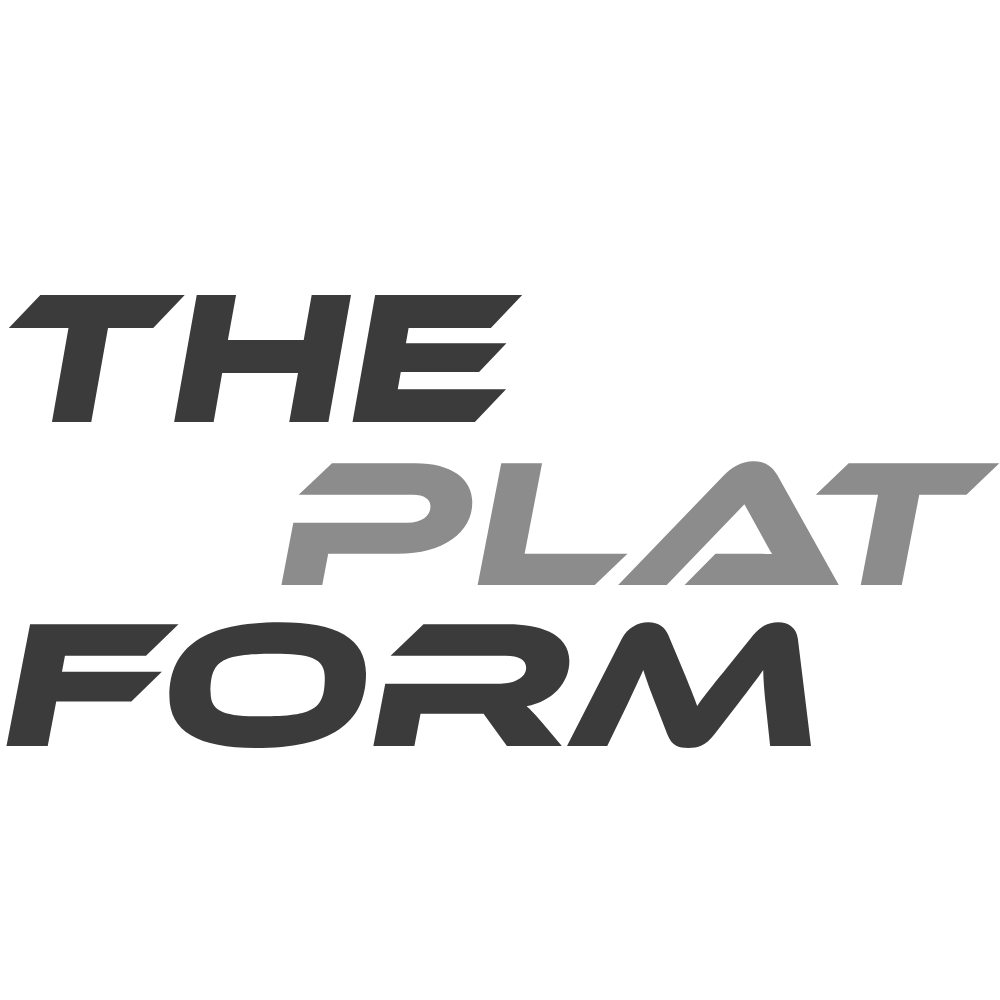
<style>
.page{position:relative;width:1000px;height:1000px;background:#ffffff}
.page>*{position:absolute;margin:0}
.t1{font:190px "EthnocentricRg-Italic";color:#3b3b3b}
.t2{font:182.1px "EthnocentricRg-Italic";color:#8c8c8c;scale:1.09 1}
.t3{font:119.8px "EthnocentricRg-Italic";color:#3b3b3b;scale:1.09 1}
.t4{font:182.1px "EthnocentricRg-Italic";color:#3b3b3b;scale:1.09 1}
</style>
<div class="page">
<p class="t1" style="left:8px;top:294px;width:515px;height:128px">THE</p>
<p class="t2" style="left:281px;top:461px;width:719px;height:124px"><span class="t3">       </span>plAT</p>
<p class="t4" style="left:6px;top:622px;width:805px;height:127px"><span class="t3">       </span>FORM</p>
</div>
